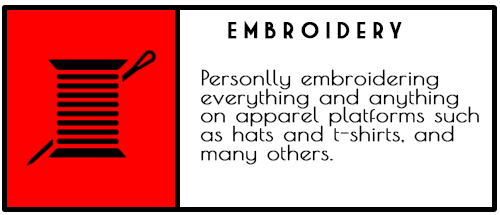
<style>
.page{position:relative;width:500px;height:215px;background:#ffffff}
.page>*{position:absolute;margin:0}
.t1{font:22.2px "MarketDeco";letter-spacing:0.26em;color:#000000;font-weight:bold}
.t2{font:20.2px "PoiretOne-Regular";letter-spacing:0.02em;color:#000000;font-weight:bold;scale:1.13 1}
</style>
<div class="page">
<p class="t1" style="left:228px;top:21px;width:174px;height:18px">Embroidery</p>
<p class="t2" style="left:200px;top:69px;width:279px;height:96px">Personlly embroidering<br>everything and anything<br>on apparel platforms such<br>as hats and t-shirts, and <br>many others.</p>
</div>
